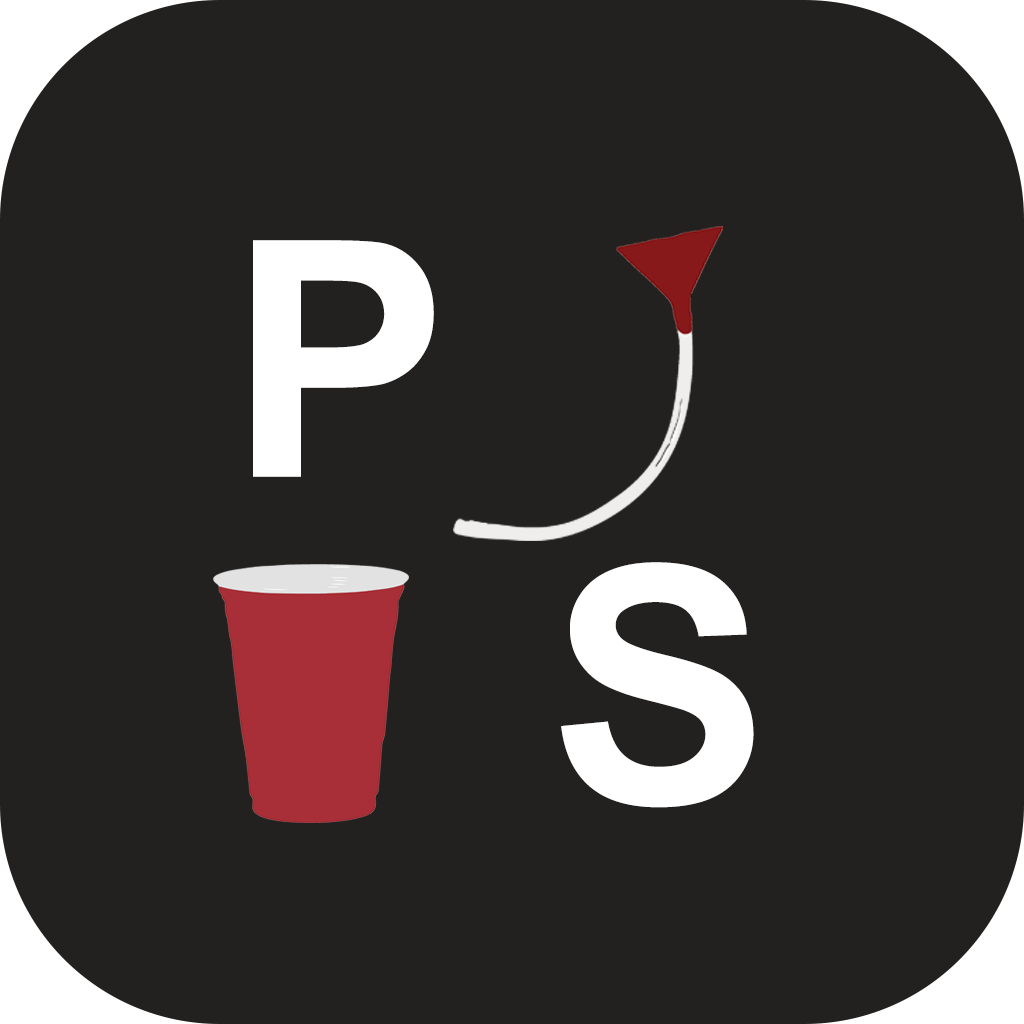
<style>
.page{position:relative;width:1024px;height:1024px;background:#232020}
.page>*{position:absolute;margin:0}
.t1{font:330px "Arial-BoldMT";letter-spacing:-0.05em;color:#ffffff}
</style>
<div class="page">
<p class="t1" style="left:253px;top:240px;width:181px;height:237px">P</p>
<p class="t1" style="left:561px;top:562px;width:193px;height:246px">S</p>
</div>
